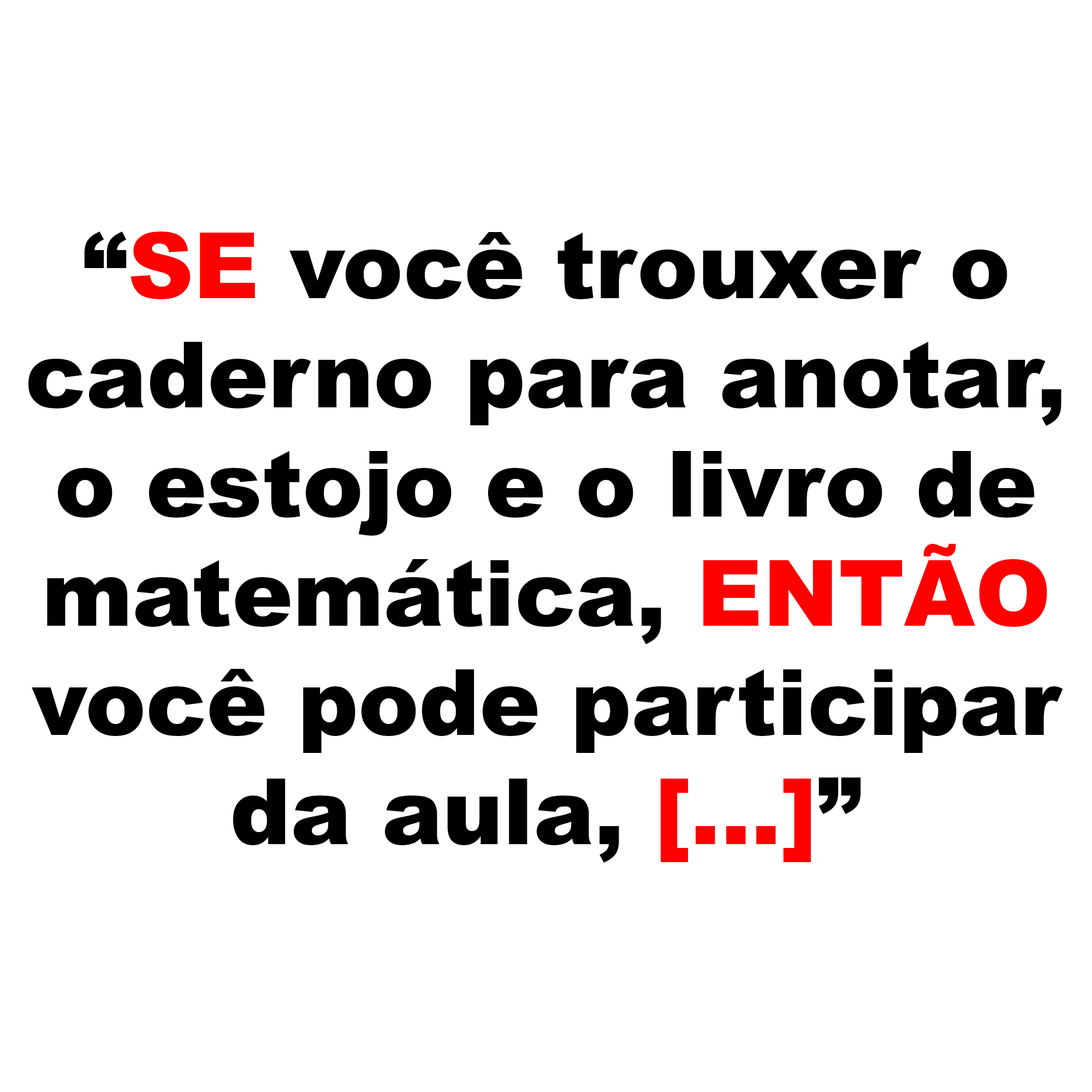
<style>
.page{position:relative;width:1092px;height:1092px;background:#ffffff}
.page>*{position:absolute;margin:0}
.t1{font:91px "Arial-Black";color:#000000}
.t2{font:91px "Arial-Black";color:#ff0000}
</style>
<div class="page">
<p class="t1" style="left:28px;top:232px;width:1035px;height:631px;text-align:center">“<span class="t2">SE</span> você trouxer o<br>caderno para anotar,<br>o estojo e o livro de<br>matemática, <span class="t2">ENTÃO<br></span>você pode participar<br>da aula, <span class="t2">[...]</span>”</p>
</div>
